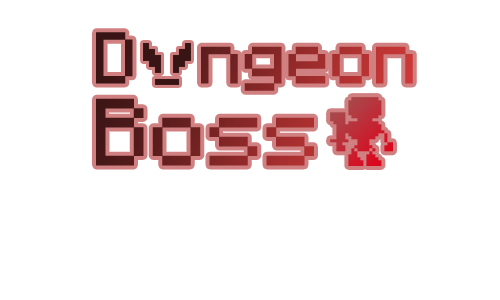
<style>
.page{position:relative;width:500px;height:300px;background:#ffffff}
.page>*{position:absolute;margin:0}
.t1{font:100px/72px "Minecraftia"}
.t2{font:130px/72px "Minecraftia"}
</style>
<div class="page">
<p class="t1" style="left:96px;top:32px;width:317px;height:134px">D ngeon<br><span class="t2">Boss</span></p>
</div>
